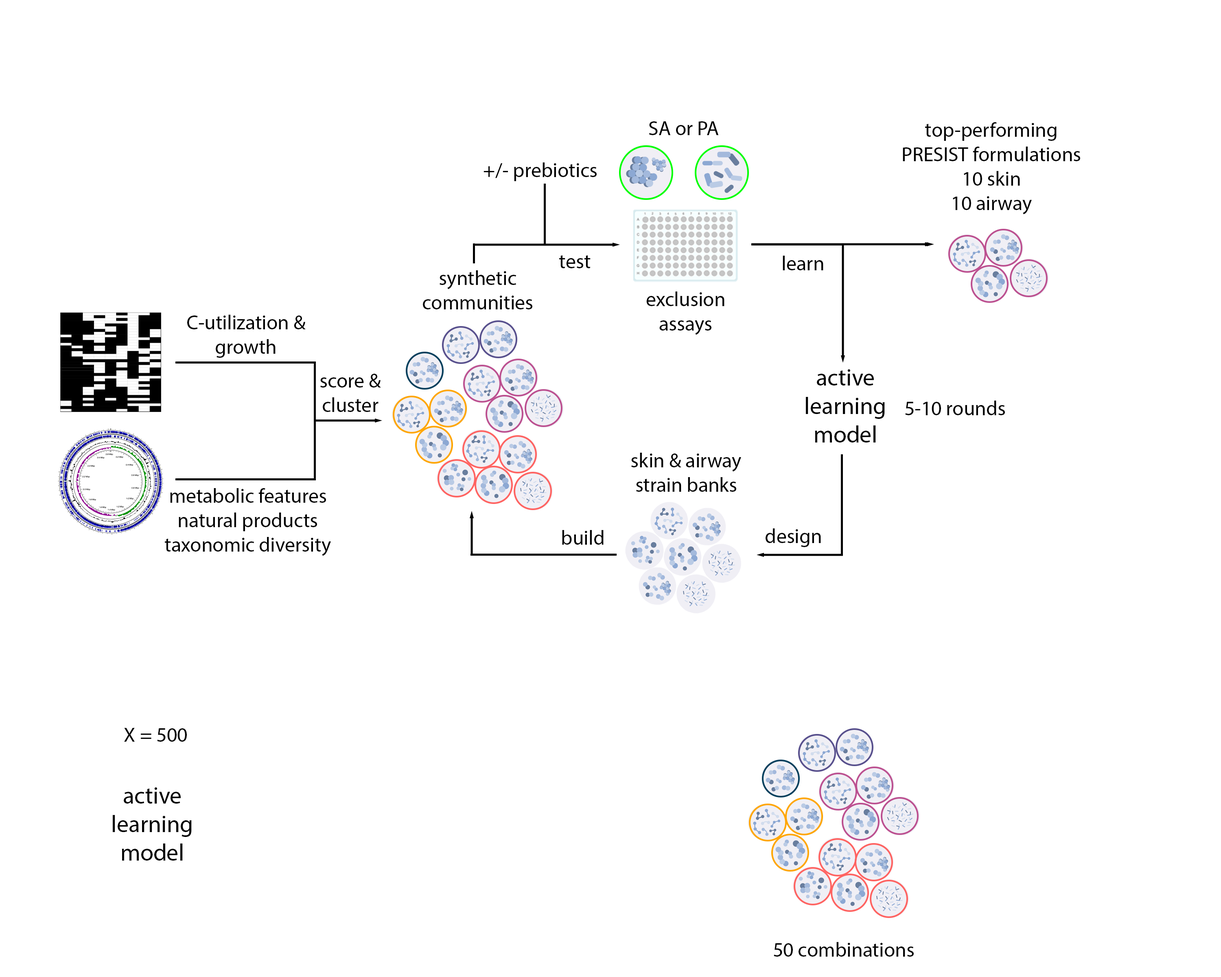
<style>
.page{position:relative;width:1221px;height:977px;background:#ffffff}
.page>*{position:absolute;margin:0}
.t1{font:20.3px "MyriadPro-Regular";color:#000000}
.t2{font:23.7px "MyriadPro-Regular";color:#000000}
</style>
<div class="page">
<p class="t1" style="left:649px;top:121px;width:70px;height:14px">SA or PA</p>
<p class="t1" style="left:903px;top:122px;width:177px;height:92px;text-align:center">top-performing<br>PRESIST formulations<br>10 skin<br>10 airway</p>
<p class="t1" style="left:483px;top:162px;width:114px;height:19px">+/- prebiotics</p>
<p class="t1" style="left:559px;top:255px;width:31px;height:13px">test</p>
<p class="t1" style="left:783px;top:256px;width:40px;height:14px">learn</p>
<p class="t1" style="left:423px;top:270px;width:109px;height:39px;text-align:center">synthetic <br>communities</p>
<p class="t1" style="left:646px;top:291px;width:78px;height:44px;text-align:center">exclusion <br>assays</p>
<p class="t1" style="left:187px;top:315px;width:119px;height:43px;text-align:center">C-utilization &amp;<br>growth</p>
<p class="t1" style="left:320px;top:374px;width:61px;height:38px;text-align:center">score &amp; <br>cluster</p>
<p class="t2" style="left:806px;top:369px;width:79px;height:73px;text-align:center">active<br>learning<br>model</p>
<p class="t1" style="left:905px;top:400px;width:100px;height:15px">5-10 rounds</p>
<p class="t1" style="left:631px;top:453px;width:110px;height:39px;text-align:center">skin &amp; airway<br>strain banks</p>
<p class="t1" style="left:165px;top:488px;width:166px;height:68px;text-align:center">metabolic features<br>natural products<br>taxonomic diversity</p>
<p class="t1" style="left:562px;top:530px;width:42px;height:15px">build</p>
<p class="t1" style="left:765px;top:528px;width:56px;height:19px">design</p>
<p class="t1" style="left:124px;top:728px;width:63px;height:13px">X = 500</p>
<p class="t2" style="left:113px;top:787px;width:79px;height:73px;text-align:center">active<br>learning<br>model</p>
<p class="t1" style="left:774px;top:942px;width:140px;height:14px">50 combinations</p>
</div>
